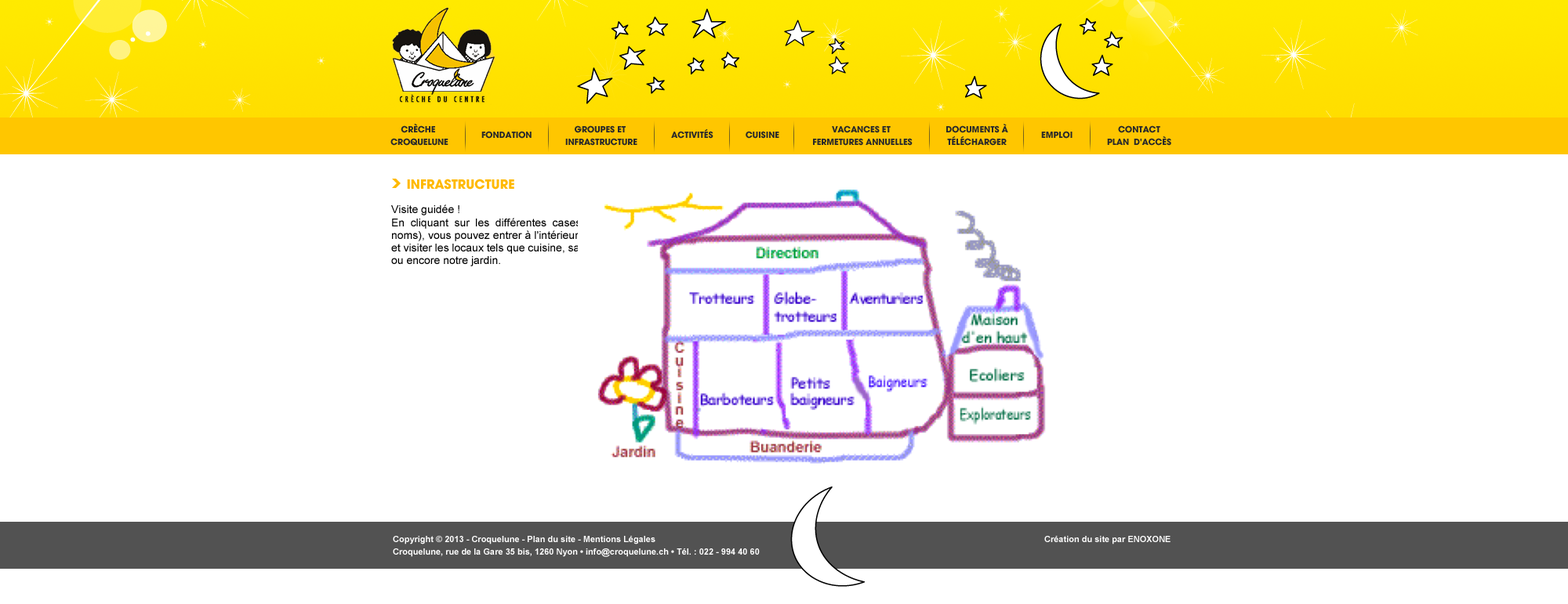
<style>
.page{position:relative;width:1568px;height:604px;background:#ffffff}
.page>*{position:absolute;margin:0}
.t1{font:9.4px/12.7px "AvantGard-Bold";color:#2a2a2a;text-transform:uppercase}
.t2{font:9.4px "AvantGard-Bold";color:#2a2a2a;text-transform:uppercase}
.t3{font:14.1px "AvantGard-Bold";color:#ffb900;text-transform:uppercase}
.t4{font:11px/12.7px "ArialMT";color:#000000}
.t5{font:8.6px/12.7px "Arial-BoldMT";color:#ffffff}
</style>
<div class="page">
<p class="t1" style="left:390px;top:123px;width:58px;height:23px;text-align:center">Crèche <br>Croquelune</p>
<p class="t1" style="left:565px;top:125px;width:72px;height:21px;text-align:center">Groupes et <br>infrastructure</p>
<p class="t1" style="left:813px;top:125px;width:100px;height:21px;text-align:center">Vacances et <br>fermetures annuelles</p>
<p class="t1" style="left:946px;top:124px;width:62px;height:22px;text-align:center">DOCUMENTs à<br>télécharger</p>
<p class="t1" style="left:1107px;top:125px;width:64px;height:21px;text-align:center">Contact<br>Plan  d'accès</p>
<p class="t2" style="left:481px;top:131px;width:51px;height:8px">Fondation</p>
<p class="t2" style="left:671px;top:129px;width:42px;height:10px">ACTIVITés</p>
<p class="t2" style="left:746px;top:131px;width:33px;height:8px">Cuisine</p>
<p class="t2" style="left:1041px;top:131px;width:32px;height:8px">Emploi</p>
<p class="t3" style="left:407px;top:179px;width:107px;height:11px">Infrastructure</p>
<p class="t4" style="left:391px;top:205px;width:263px;height:62px;text-align:justify">Visite guidée !<br>En cliquant sur les différentes cases (ou différents noms), vous pouvez entrer à l'intérieur de Croquelune et visiter les locaux tels que cuisine, salles de groupes ou encore notre jardin.</p>
<p class="t5" style="left:393px;top:536px;width:778px;height:21px">Copyright © 2013 - Croquelune - Plan du site - Mentions Légales                                                             Création du site par ENOXONE<br>Croquelune, rue de la Gare 35 bis, 1260 Nyon • info@croquelune.ch • Tél. : 022 - 994 40 60</p>
</div>
